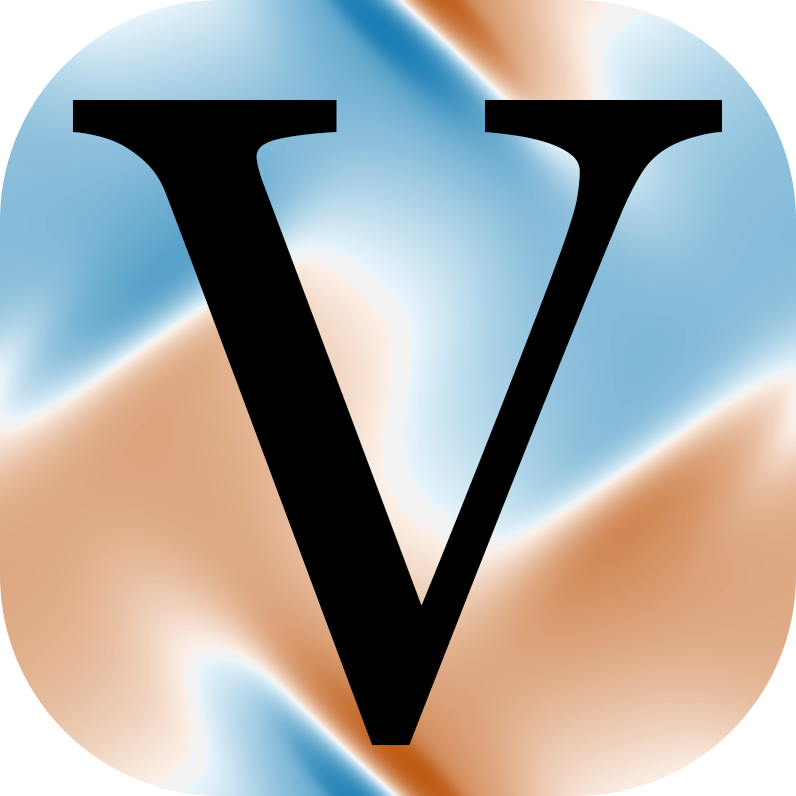
<style>
.page{position:relative;width:796px;height:796px}
.page>*{position:absolute;margin:0}
.t1{font:919.7px "Georgia";color:#000000}
</style>
<div class="page">
<p class="t1" style="left:72px;top:100px;width:650px;height:645px">V</p>
</div>
